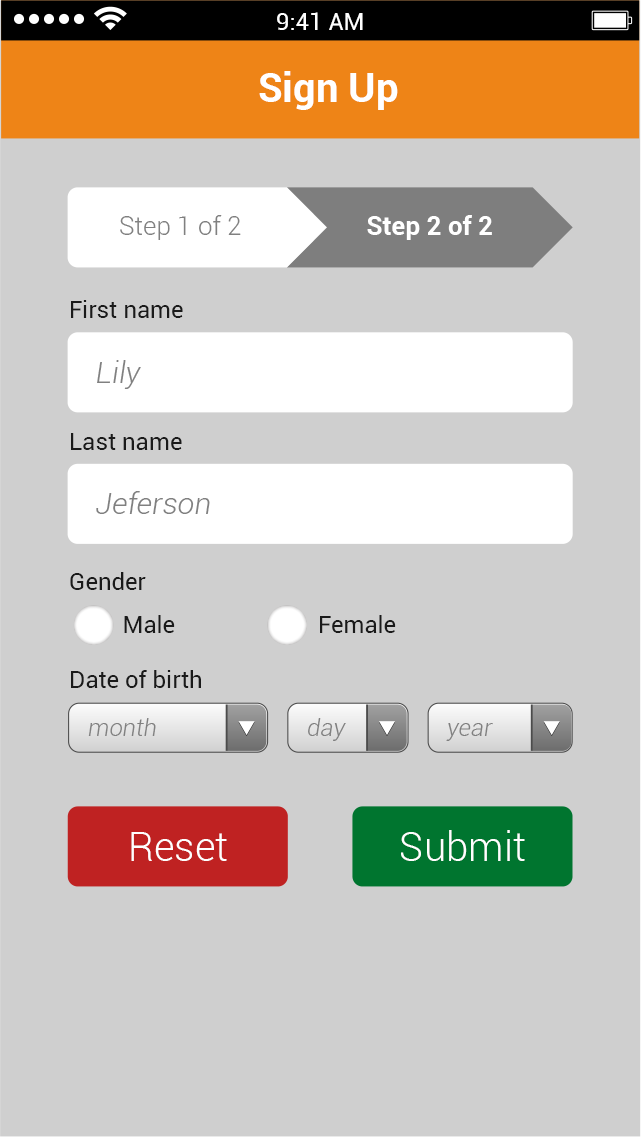
<style>
.page{position:relative;width:641px;height:1137px;background:#cfcfcf}
.page>*{position:absolute;margin:0}
.t1{font:24px "Roboto-Regular";color:#ffffff}
.t2{font:40px "Roboto-Bold";color:#ffffff}
.t3{font:26px "Roboto-Light";color:#808080}
.t4{font:26px "Roboto-Bold";color:#ffffff}
.t5{font:24px "Roboto-Regular";color:#1a1a1a}
.t6{font:30px "Roboto-LightItalic";color:#808080}
.t7{font:24px "Roboto-LightItalic";color:#808080}
.t8{font:40px "Roboto-Light";color:#ffffff}
</style>
<div class="page">
<p class="t1" style="left:277px;top:12px;width:86px;height:18px">9:41 AM</p>
<p class="t2" style="left:259px;top:71px;width:139px;height:39px">Sign Up</p>
<p class="t3" style="left:120px;top:215px;width:121px;height:25px">Step 1 of 2</p>
<p class="t4" style="left:367px;top:215px;width:125px;height:25px">Step 2 of 2</p>
<p class="t5" style="left:71px;top:300px;width:112px;height:18px">First name</p>
<p class="t6" style="left:97px;top:360px;width:44px;height:29px">Lily</p>
<p class="t5" style="left:71px;top:433px;width:111px;height:17px">Last name</p>
<p class="t6" style="left:96px;top:491px;width:114px;height:23px">Jeferson</p>
<p class="t5" style="left:70px;top:572px;width:76px;height:18px">Gender</p>
<p class="t5" style="left:124px;top:615px;width:51px;height:18px">Male</p>
<p class="t5" style="left:320px;top:615px;width:76px;height:18px">Female</p>
<p class="t5" style="left:71px;top:670px;width:130px;height:18px">Date of birth</p>
<p class="t7" style="left:88px;top:718px;width:68px;height:18px">month</p>
<p class="t7" style="left:308px;top:718px;width:38px;height:23px">day</p>
<p class="t7" style="left:446px;top:723px;width:47px;height:18px">year</p>
<p class="t8" style="left:131px;top:832px;width:96px;height:29px">Reset</p>
<p class="t8" style="left:401px;top:830px;width:124px;height:31px">Submit</p>
</div>
